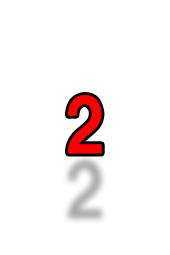
<style>
.page{position:relative;width:170px;height:255px;background:#ffffff}
.page>*{position:absolute;margin:0}
.t1{font:72px "HGSSoeiKakugothicUB";color:#ff0000}
</style>
<div class="page">
<p class="t1" style="left:68px;top:95px;width:34px;height:59px">2</p>
</div>
